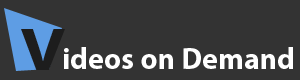
<style>
.page{position:relative;width:300px;height:80px;background:#333333}
.page>*{position:absolute;margin:0}
.t1{font:60px "MyriadPro-Bold";color:#1d1d1d;scale:1.18 1}
.t2{font:30px "MyriadPro-Bold";color:#ffffff}
</style>
<div class="page">
<p class="t1" style="left:21px;top:29px;width:44px;height:41px">V</p>
<p class="t2" style="left:64px;top:47px;width:229px;height:22px">ideos on Demand</p>
</div>
